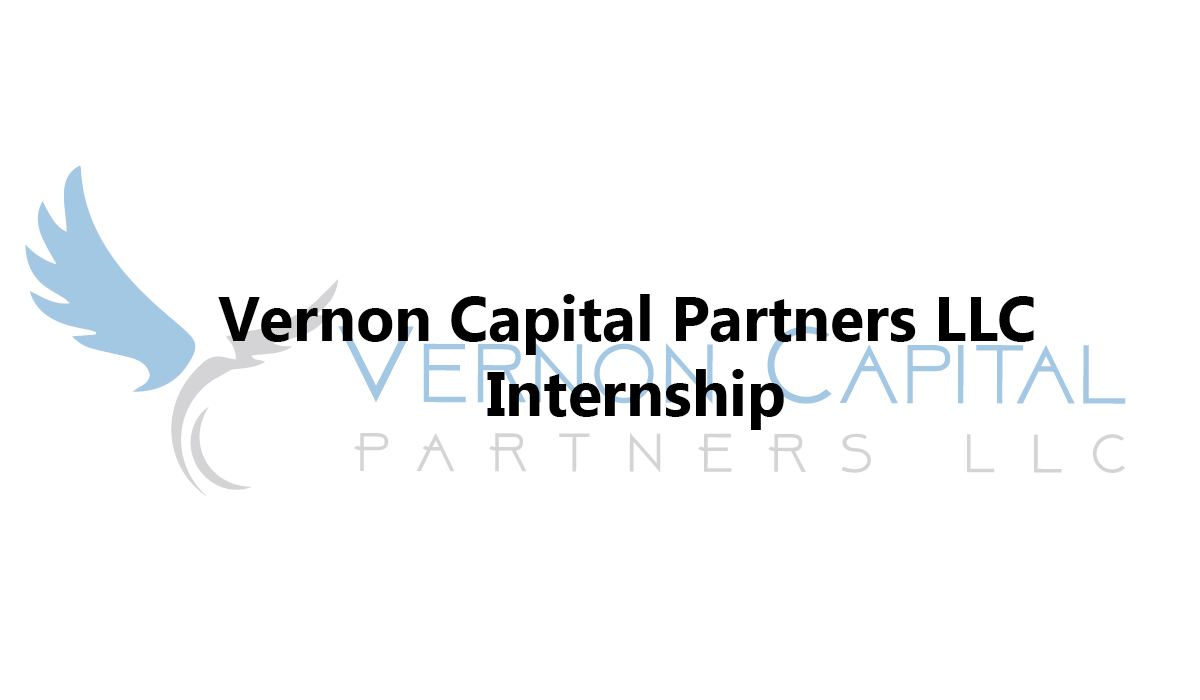
<style>
.page{position:relative;width:1200px;height:700px;background:#ffffff}
.page>*{position:absolute;margin:0}
.t1{font:62.5px "MicrosoftTaiLe-Bold";color:#000000}
</style>
<div class="page">
<p class="t1" style="left:218px;top:294px;width:816px;height:136px;text-align:center">Vernon Capital Partners LLC<br> Internship</p>
</div>
